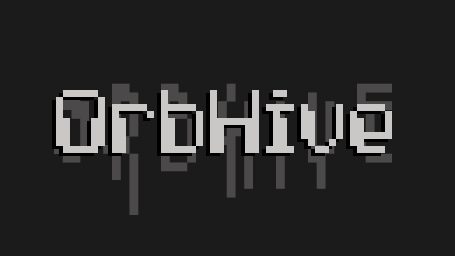
<style>
.page{position:relative;width:455px;height:256px;background:#1b1b1b}
.page>*{position:absolute;margin:0}
.t1{font:140px "ComputerPixel-7";color:#cac7c7}
</style>
<div class="page">
<p class="t1" style="left:56px;top:90px;width:336px;height:63px">OrbHive</p>
<p class="t1" style="left:56px;top:90px;width:336px;height:63px">OrbHive</p>
</div>
